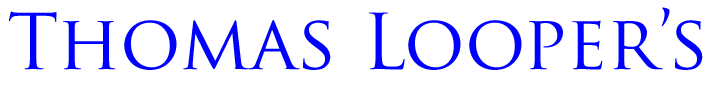
<style>
.page{position:relative;width:715px;height:87px;background:#ffffff}
.page>*{position:absolute;margin:0}
.t1{font:75px "TrajanPro-Regular";color:#0000ff}
</style>
<div class="page">
<p class="t1" style="left:8px;top:7px;width:695px;height:63px">Thomas Looper’s</p>
</div>
